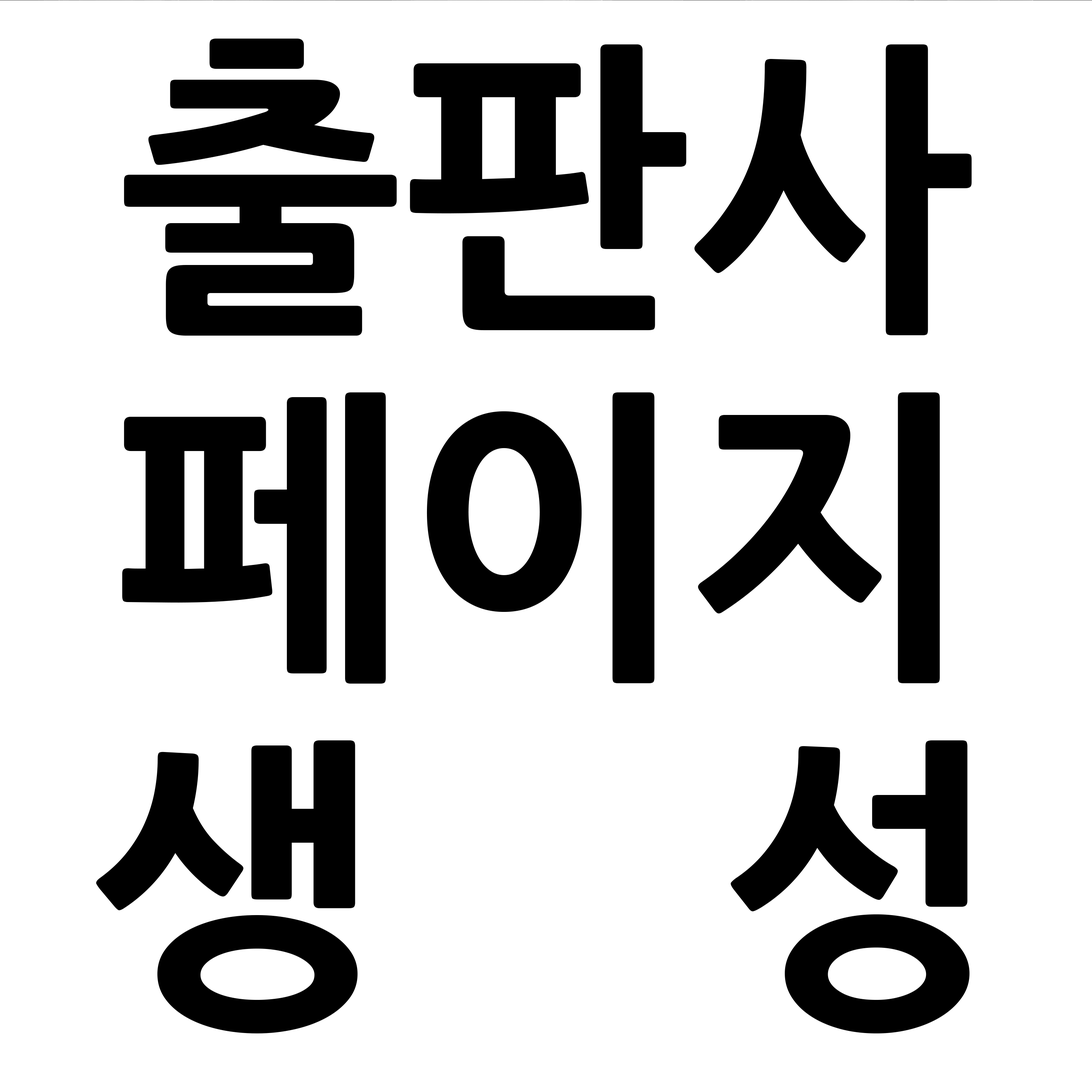
<style>
.page{position:relative;width:1092px;height:1092px;background:#ffffff}
.page>*{position:absolute;margin:0}
.t1{font:303.3px/348px "NanumGothicExtraBold";color:#000000}
</style>
<div class="page">
<p class="t1" style="left:96px;top:38px;width:876px;height:995px;text-align:center">출판사<br>페이지<br>생    성</p>
</div>
